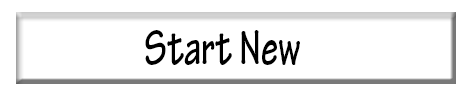
<style>
.page{position:relative;width:470px;height:98px;background:#ffffff}
.page>*{position:absolute;margin:0}
.t1{font:52.3px "TektonPro-Bold";color:#000000;scale:0.69 1}
</style>
<div class="page">
<p class="t1" style="left:145px;top:30px;width:155px;height:35px">Start New</p>
</div>
